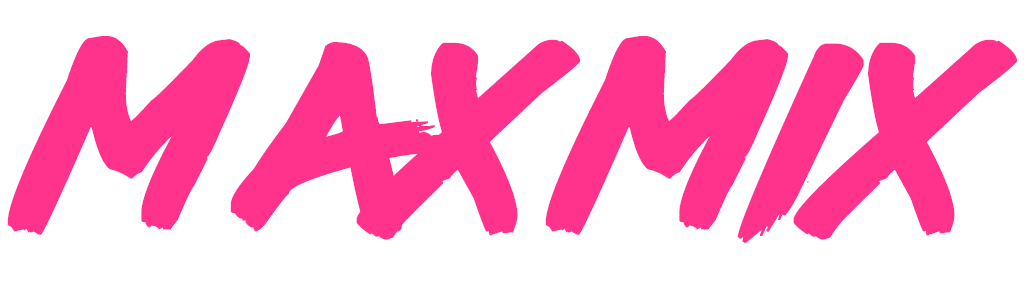
<style>
.page{position:relative;width:1024px;height:300px;background:#ffffff}
.page>*{position:absolute;margin:0}
.t1{font:235.1px "lazer84";color:#ff338b}
</style>
<div class="page">
<p class="t1" style="left:7px;top:36px;width:1011px;height:208px">maxmix</p>
</div>
